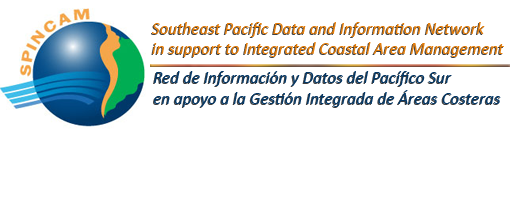
<style>
.page{position:relative;width:522px;height:211px;background:#ffffff}
.page>*{position:absolute;margin:0}
.t1{font:17px "Calibri-Italic";color:#e37c09}
.t2{font:17.1px "Calibri-Italic";color:#043867}
</style>
<div class="page">
<p class="t1" style="left:152px;top:22px;width:352px;height:35px">Southeast Pacific Data and Information Network <br>in support to Integrated Coastal Area Management</p>
<p class="t2" style="left:154px;top:71px;width:347px;height:36px">Red de Información y Datos del Pacífico Sur <br>en apoyo a la Gestión Integrada de Áreas Costeras</p>
</div>
